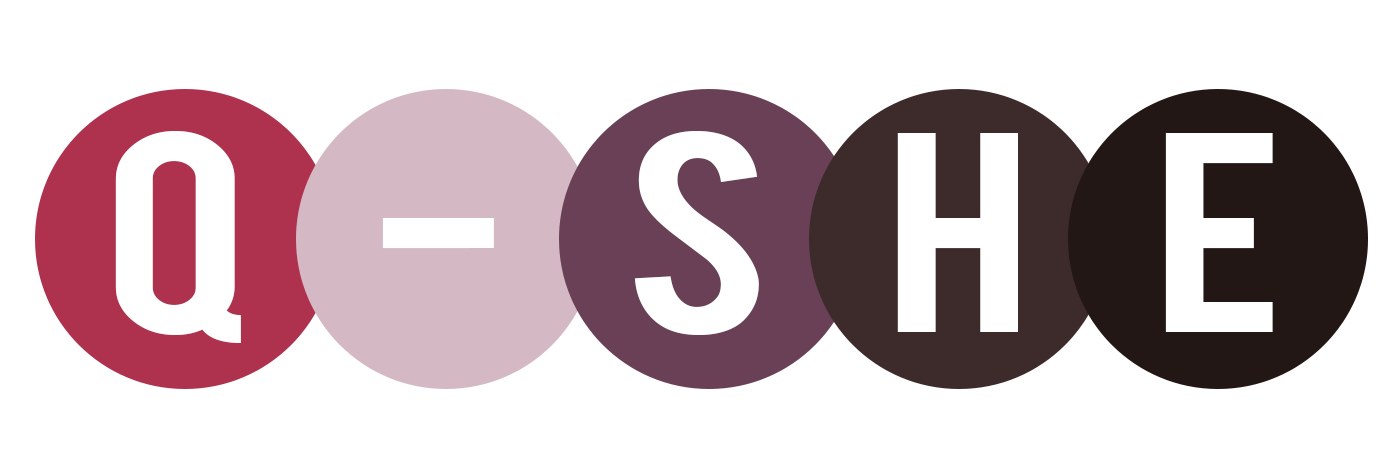
<style>
.page{position:relative;width:1398px;height:456px;background:#ffffff}
.page>*{position:absolute;margin:0}
.t1{font:223.3px "Bebas";letter-spacing:0.415em;color:#ffffff;scale:1.25 1}
.t2{font:223.3px "Bebas";letter-spacing:0.405em;color:#ffffff;scale:1.25 1}
.t3{font:223.3px "Bebas";letter-spacing:0.435em;color:#ffffff;scale:1.25 1}
</style>
<div class="page">
<p class="t1" style="left:115px;top:131px;width:1158px;height:212px">Q-<span class="t2">S</span><span class="t3">H</span>E</p>
</div>
